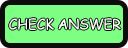
<style>
.page{position:relative;width:128px;height:48px;background:#7cff82}
.page>*{position:absolute;margin:0}
.t1{font:14px "ComicSansMS";color:#ffffff}
.t2{font:12px "ComicSansMS";color:#ffffff}
</style>
<div class="page">
<p class="t1" style="left:9px;top:18px;width:112px;height:12px"><span class="t2"><br></span>CHECK ANSWER</p>
</div>
